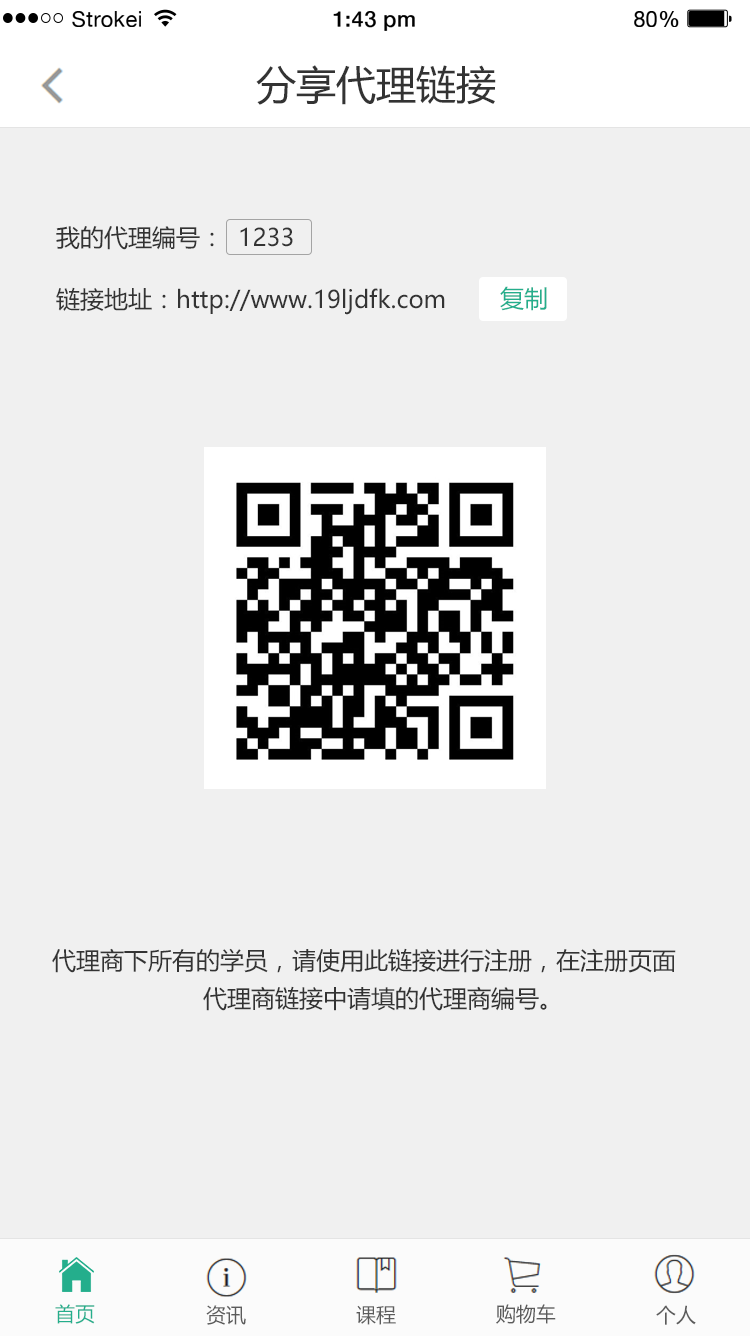
<style>
.page{position:relative;width:750px;height:1336px;background:#f0f0f0}
.page>*{position:absolute;margin:0}
.t1{font:21.8px "HelveticaNeue";letter-spacing:0.02em;color:#000000}
.t2{font:21.8px "HelveticaNeue-Medium";letter-spacing:0.02em;color:#000000}
.t3{font:40px "MicrosoftYaHei";color:#333333}
.t4{font:24px "MicrosoftYaHei";color:#333333}
.t5{font:24px "MicrosoftYaHei";color:#24ae8c}
.t6{font:20px "MicrosoftYaHei";color:#24ae8c}
.t7{font:20px "MicrosoftYaHei";color:#5b5b5b}
</style>
<div class="page">
<p class="t1" style="left:72px;top:11px;width:69px;height:16px">Strokei</p>
<p class="t2" style="left:333px;top:11px;width:82px;height:20px">1:43 pm</p>
<p class="t1" style="left:634px;top:11px;width:45px;height:16px">80<span class="t2">%</span></p>
<p class="t3" style="left:256px;top:65px;width:240px;height:40px">分享代理链接</p>
<p class="t4" style="left:56px;top:226px;width:237px;height:24px">我的代理编号：  1233</p>
<p class="t4" style="left:56px;top:287px;width:389px;height:28px">链接地址：http://www.19ljdfk.com</p>
<p class="t5" style="left:500px;top:286px;width:47px;height:25px">复制</p>
<p class="t4" style="left:52px;top:948px;width:624px;height:25px">代理商下所有的学员，请使用此链接进行注册，在注册页面</p>
<p class="t4" style="left:203px;top:986px;width:344px;height:25px">代理商链接中请填的代理商编号。</p>
<p class="t6" style="left:55px;top:1304px;width:40px;height:20px">首页</p>
<p class="t7" style="left:206px;top:1305px;width:40px;height:20px">资讯</p>
<p class="t7" style="left:356px;top:1305px;width:40px;height:20px">课程</p>
<p class="t7" style="left:496px;top:1304px;width:60px;height:20px">购物车</p>
<p class="t7" style="left:656px;top:1305px;width:40px;height:20px">个人</p>
</div>
